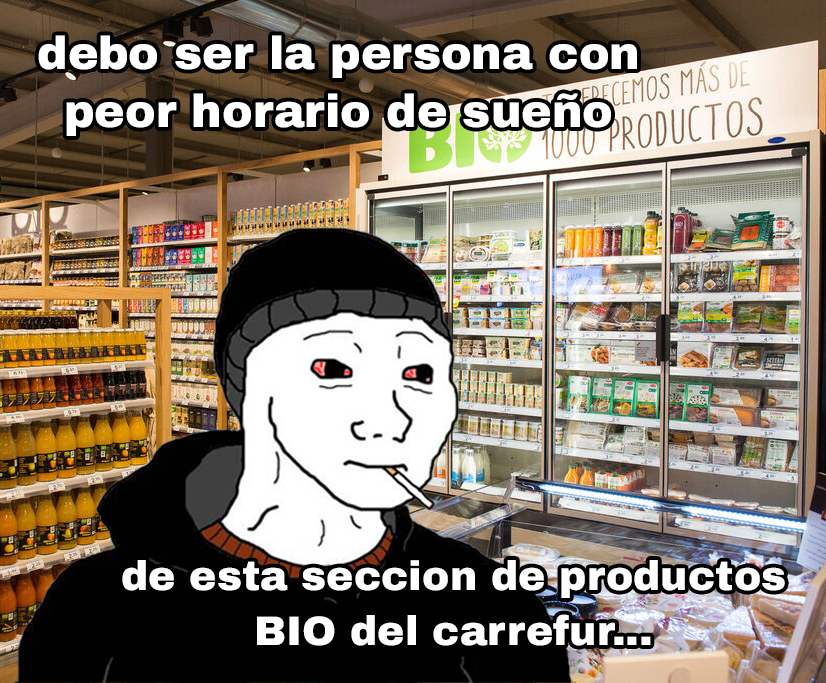
<style>
.page{position:relative;width:826px;height:683px}
.page>*{position:absolute;margin:0}
.t1{font:45.9px "ArchivoBlack-Regular";color:#ffffff}
.t2{font:41.1px "ArchivoBlack-Regular";color:#ffffff}
</style>
<div class="page">
<p class="t1" style="left:38px;top:35px;width:599px;height:101px;text-align:center">debo ser la persona con<br>peor horario de sueño</p>
<p class="t2" style="left:122px;top:560px;width:663px;height:86px;text-align:center">de esta seccion de productos<br>BIO del carrefur...</p>
</div>
